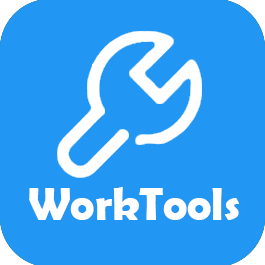
<style>
.page{position:relative;width:265px;height:265px;background:#2196f3}
.page>*{position:absolute;margin:0}
.t1{font:45.5px "BerlinSansFBDemi-Bold";color:#ffffff}
</style>
<div class="page">
<p class="t1" style="left:29px;top:187px;width:210px;height:33px">WorkTools</p>
</div>
